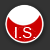
<style>
.page{position:relative;width:50px;height:50px;background:#333333}
.page>*{position:absolute;margin:0}
.t1{font:15px "ArialMT";color:#ffffff}
</style>
<div class="page">
<p class="t1" style="left:15px;top:27px;width:21px;height:11px">I.S.</p>
</div>
